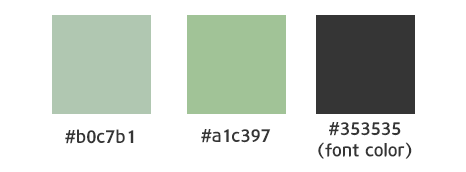
<style>
.page{position:relative;width:466px;height:172px;background:#ffffff}
.page>*{position:absolute;margin:0}
.t1{font:18px "12LotteMartHappyMedium";color:#353535}
</style>
<div class="page">
<p class="t1" style="left:318px;top:122px;width:94px;height:37px;text-align:center">#353535<br>(font color)</p>
<p class="t1" style="left:65px;top:129px;width:69px;height:15px">#b0c7b1</p>
<p class="t1" style="left:201px;top:129px;width:70px;height:14px">#a1c397</p>
</div>
